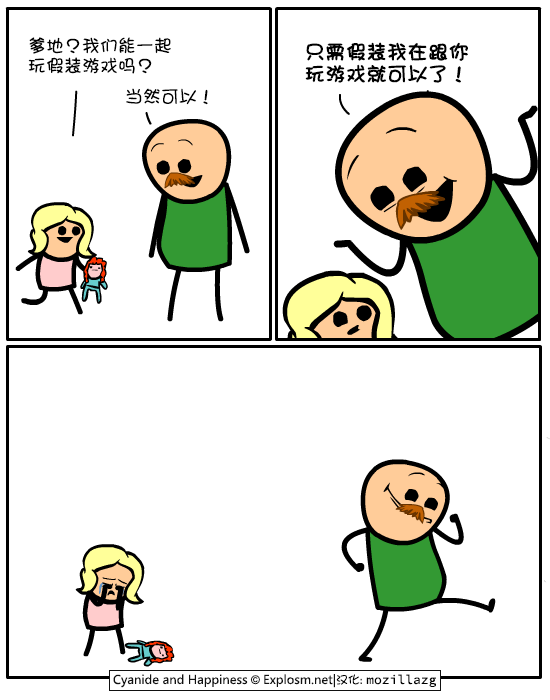
<style>
.page{position:relative;width:550px;height:700px;background:#ffffff}
.page>*{position:absolute;margin:0}
.t1{font:18px/20px "DFGirl";color:#000000}
.t2{font:20px/22px "DFGirl";color:#000000;font-weight:bold}
.t3{font:18px "DFGirl";color:#000000}
</style>
<div class="page">
<p class="t1" style="left:28px;top:37px;width:143px;height:37px">爹地？我们能一起<br>玩假装游戏吗？</p>
<p class="t2" style="left:305px;top:42px;width:163px;height:41px">只需假装我在跟你<br>玩游戏就可以了！</p>
<p class="t3" style="left:126px;top:88px;width:82px;height:17px">当然可以！</p>
</div>
